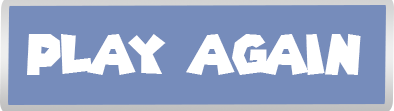
<style>
.page{position:relative;width:394px;height:111px;background:#768cbb}
.page>*{position:absolute;margin:0}
.t1{font:54.8px "SuperMarioGalaxy";color:#ffffff}
</style>
<div class="page">
<p class="t1" style="left:27px;top:34px;width:334px;height:41px">Play again</p>
</div>
